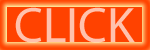
<style>
.page{position:relative;width:150px;height:50px;background:#ff4200}
.page>*{position:absolute;margin:0}
.t1{font:50px "Myriad-Roman";color:#ffc2ad}
</style>
<div class="page">
<p class="t1" style="left:15px;top:7px;width:120px;height:36px">CLICK</p>
</div>
